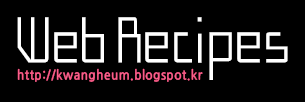
<style>
.page{position:relative;width:305px;height:102px;background:#000000}
.page>*{position:absolute;margin:0}
.t1{font:65.4px "SanDungunL";letter-spacing:-0.04em;color:#ffffff;scale:0.95 1}
.t2{font:65.4px "SanDungunL";letter-spacing:-0.04em;scale:0.95 1}
.t3{font:13px "NanumGothicBold";letter-spacing:0.04em;color:#fc5e8b;scale:0.93 1}
</style>
<div class="page">
<p class="t1" style="left:17px;top:17px;width:271px;height:57px">Web Recipes</p>
<p class="t2" style="left:17px;top:23px;width:271px;height:57px">Web Recipes</p>
<p class="t3" style="left:17px;top:68px;width:186px;height:14px">http://kwangheum.blogspot.kr</p>
</div>
